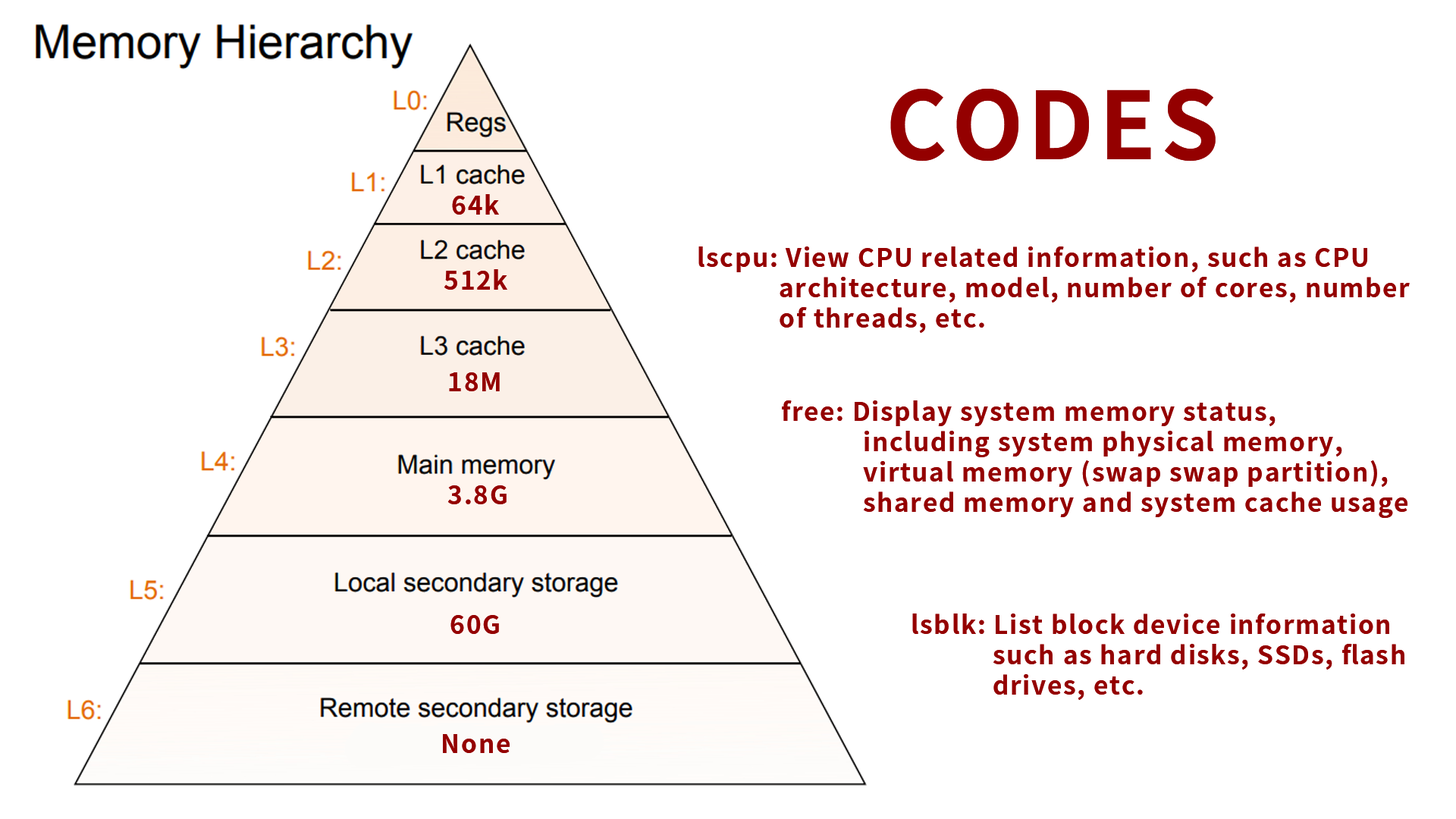
<style>
.page{position:relative;width:1456px;height:819px;background:#ffffff}
.page>*{position:absolute;margin:0}
.t1{font:93.2px "SourceHanSansCN-Bold";letter-spacing:0.05em;color:#940000}
.t2{font:25.3px "SourceHanSansCN-Bold";letter-spacing:0.05em;color:#940000}
</style>
<div class="page">
<p class="t1" style="left:890px;top:89px;width:326px;height:73px">CODES</p>
<p class="t2" style="left:452px;top:194px;width:47px;height:21px">64k</p>
<p class="t2" style="left:698px;top:246px;width:712px;height:87px">lscpu: View CPU related information, such as CPU <br>   architecture, model, number of cores, number <br>   of threads, etc.</p>
<p class="t2" style="left:444px;top:269px;width:63px;height:21px">512k</p>
<p class="t2" style="left:449px;top:372px;width:51px;height:19px">18M</p>
<p class="t2" style="left:782px;top:400px;width:625px;height:118px">free: Display system memory status,<br>    including system physical memory, <br>   virtual memory (swap swap partition), <br>   shared memory and system cache usage</p>
<p class="t2" style="left:447px;top:485px;width:60px;height:19px">3.8G</p>
<p class="t2" style="left:450px;top:615px;width:49px;height:19px">60G</p>
<p class="t2" style="left:912px;top:613px;width:492px;height:87px">lsblk: List block device information <br>   such as hard disks, SSDs, flash <br>   drives, etc.</p>
<p class="t2" style="left:443px;top:734px;width:67px;height:19px">None</p>
</div>
